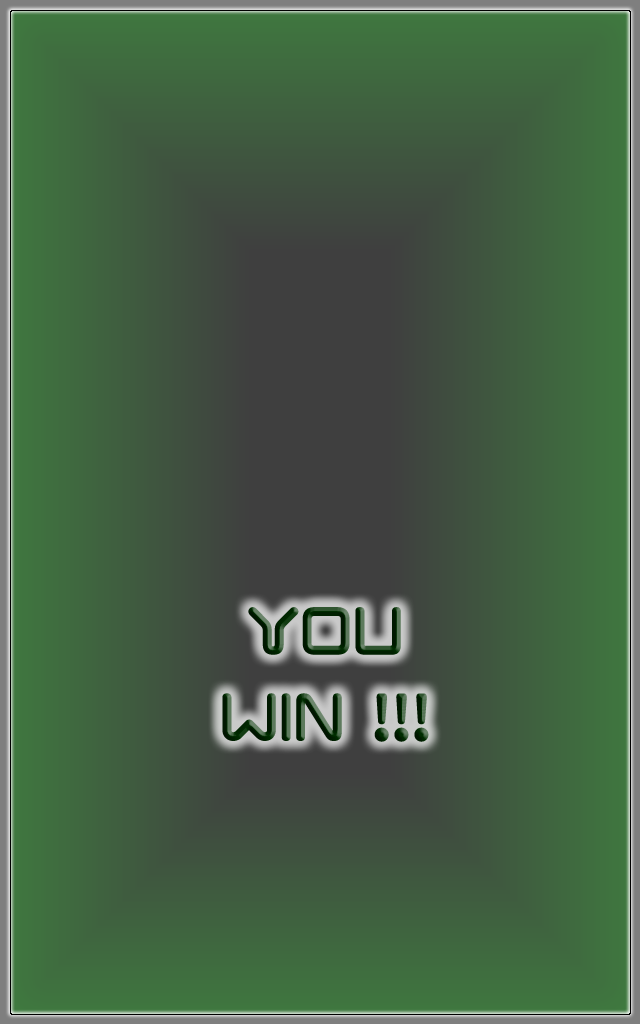
<style>
.page{position:relative;width:640px;height:1024px}
.page>*{position:absolute;margin:0}
.t1{font:72px "Chilopod-Regular"}
</style>
<div class="page">
<p class="t1" style="left:222px;top:607px;width:207px;height:135px;text-align:center">You<br>WIN !!!</p>
</div>
